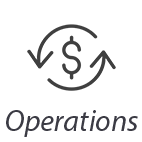
<style>
.page{position:relative;width:142px;height:142px;background:#ffffff}
.page>*{position:absolute;margin:0}
.t1{font:30px "MyriadPro-It";color:#3b3b44}
</style>
<div class="page">
<p class="t1" style="left:6px;top:110px;width:132px;height:27px">Operations</p>
</div>
